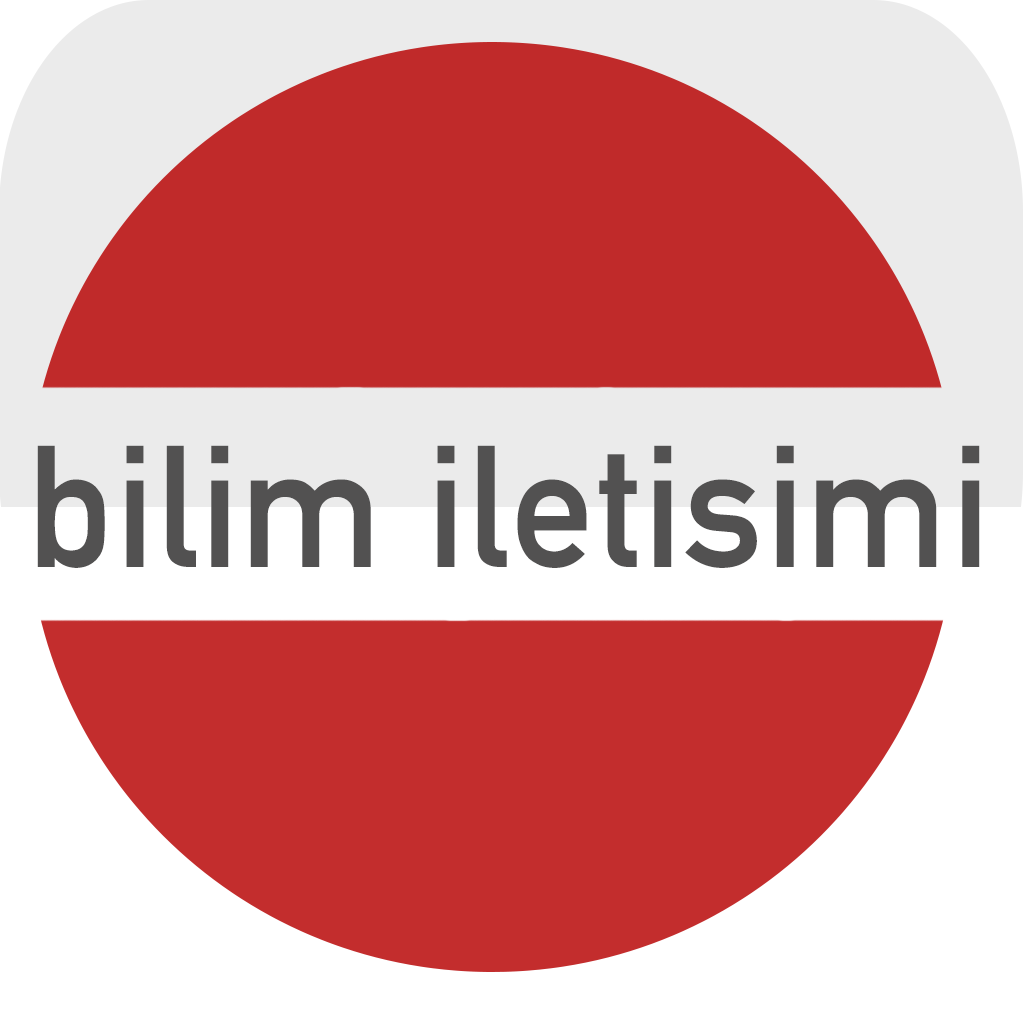
<style>
.page{position:relative;width:1024px;height:1024px;background:#ffffff}
.page>*{position:absolute;margin:0}
.t1{font:170px "DINAlternate-Bold";color:#525151}
</style>
<div class="page">
<p class="t1" style="left:37px;top:445px;width:943px;height:123px">bilim iletisimi</p>
</div>
